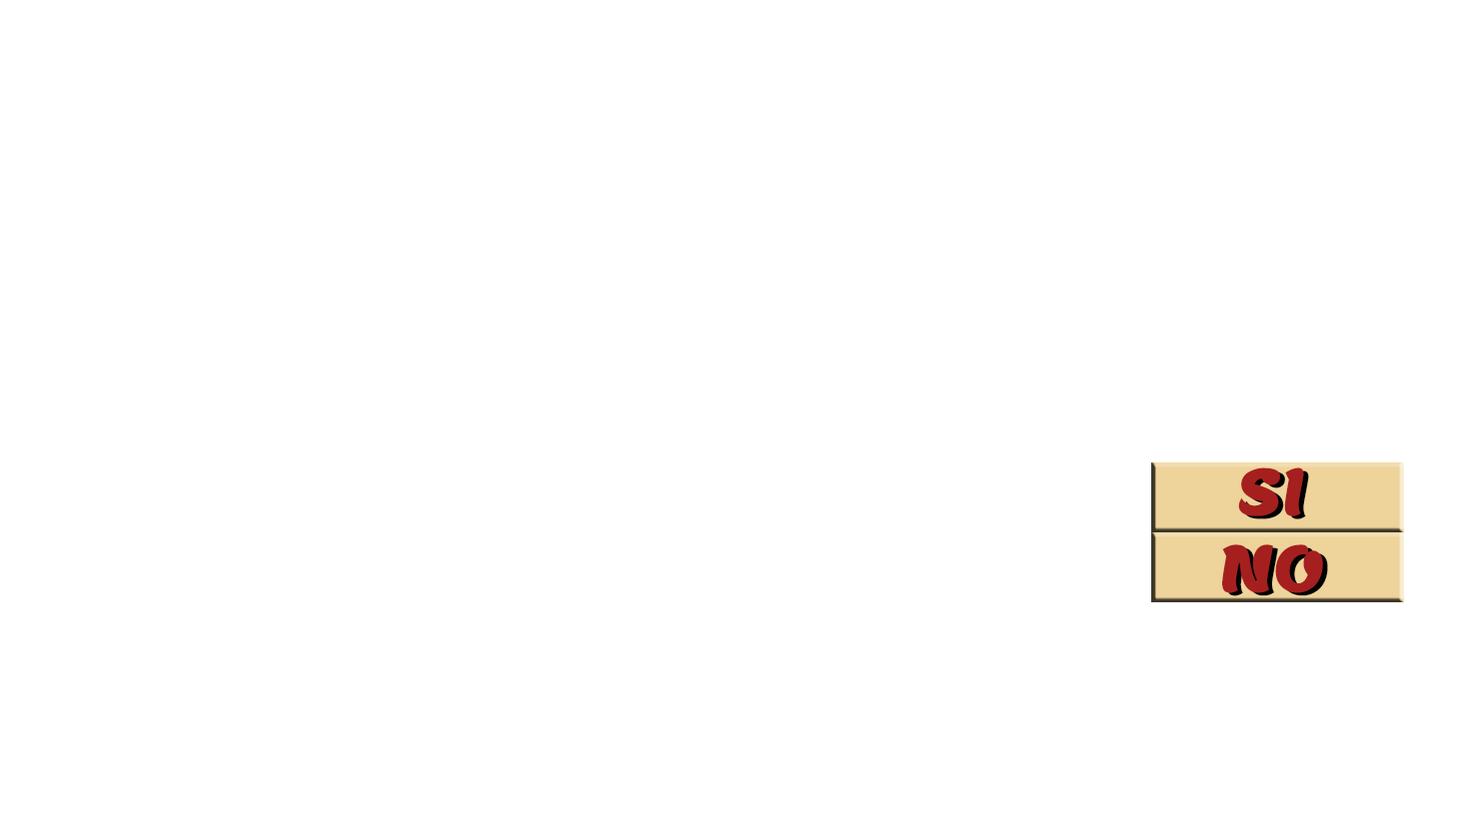
<style>
.page{position:relative;width:1457px;height:818px;background:#ffffff}
.page>*{position:absolute;margin:0}
.t1{font:63.9px "Lemon-Regular";color:#a61f1f}
.t2{font:63.9px "Lemon-Regular"}
</style>
<div class="page">
<p class="t1" style="left:1222px;top:468px;width:101px;height:126px;text-align:center">SI<br>NO</p>
<p class="t2" style="left:1227px;top:471px;width:101px;height:126px;text-align:center">SI<br>NO</p>
</div>
